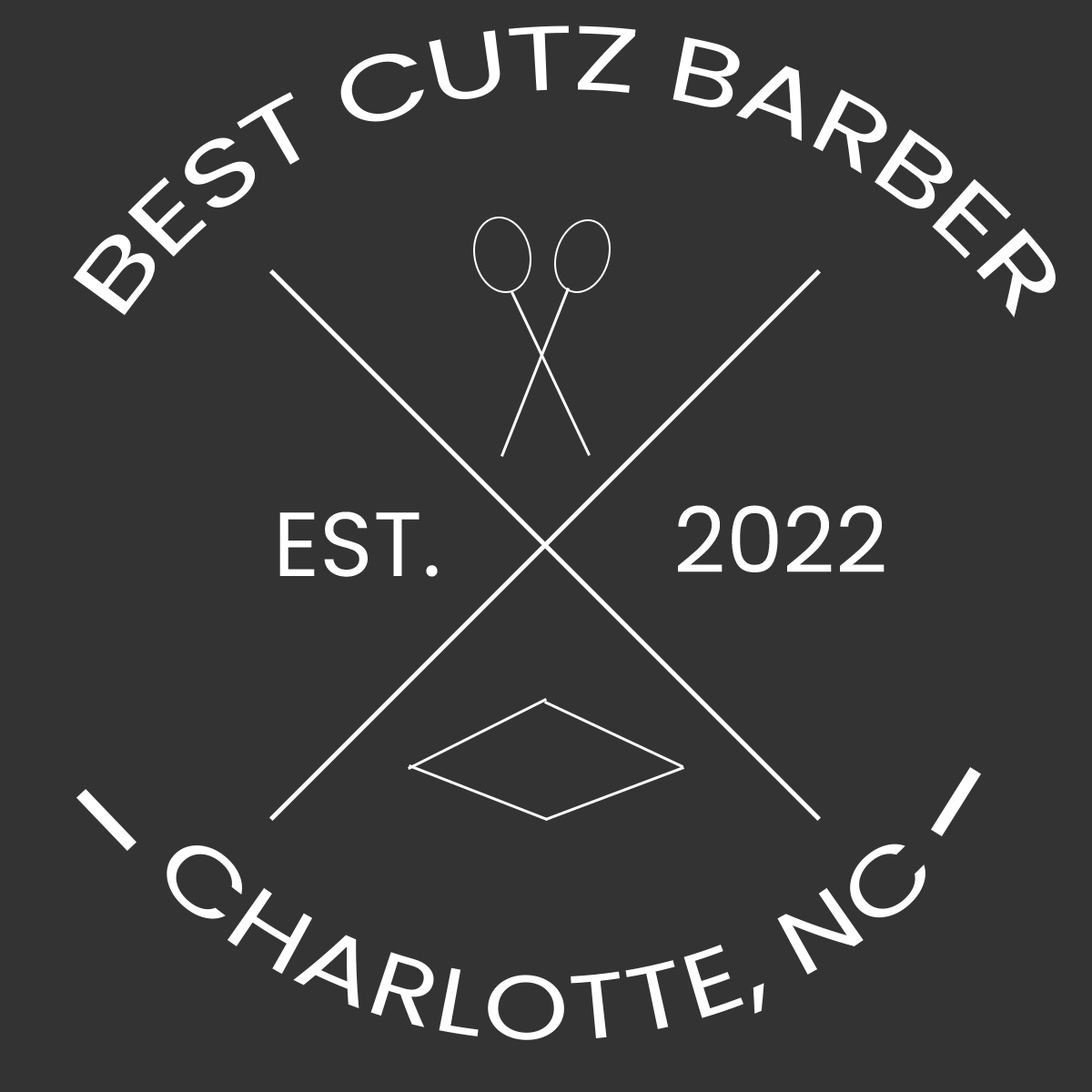
<style>
.page{position:relative;width:1092px;height:1092px;background:#333333}
.page>*{position:absolute;margin:0}
.t1{font:91px "Poppins-Regular";color:#ffffff}
</style>
<div class="page">
<p class="t1" style="left:73px;top:25px;width:983px;height:293px">BEST CUTZ BARBER</p>
<p class="t1" style="left:678px;top:505px;width:207px;height:67px">2022</p>
<p class="t1" style="left:279px;top:511px;width:159px;height:66px">EST.</p>
<p class="t1" style="left:167px;top:844px;width:758px;height:196px">CHARLOTTE, NC</p>
</div>
